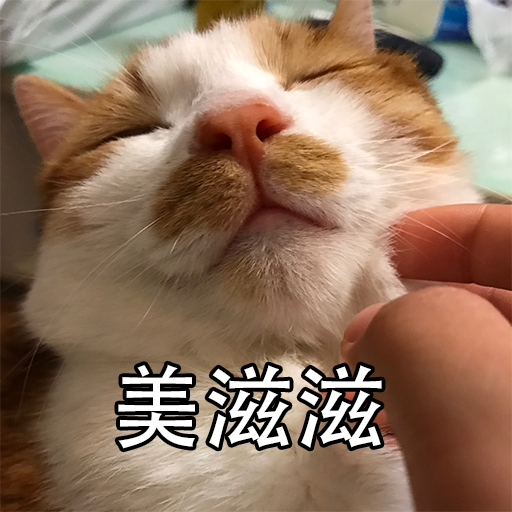
<style>
.page{position:relative;width:512px;height:512px}
.page>*{position:absolute;margin:0}
.t1{font:91.9px "AdobeHeitiStd-Regular";color:#ffffff}
</style>
<div class="page">
<p class="t1" style="left:118px;top:364px;width:264px;height:85px">美滋滋</p>
</div>
